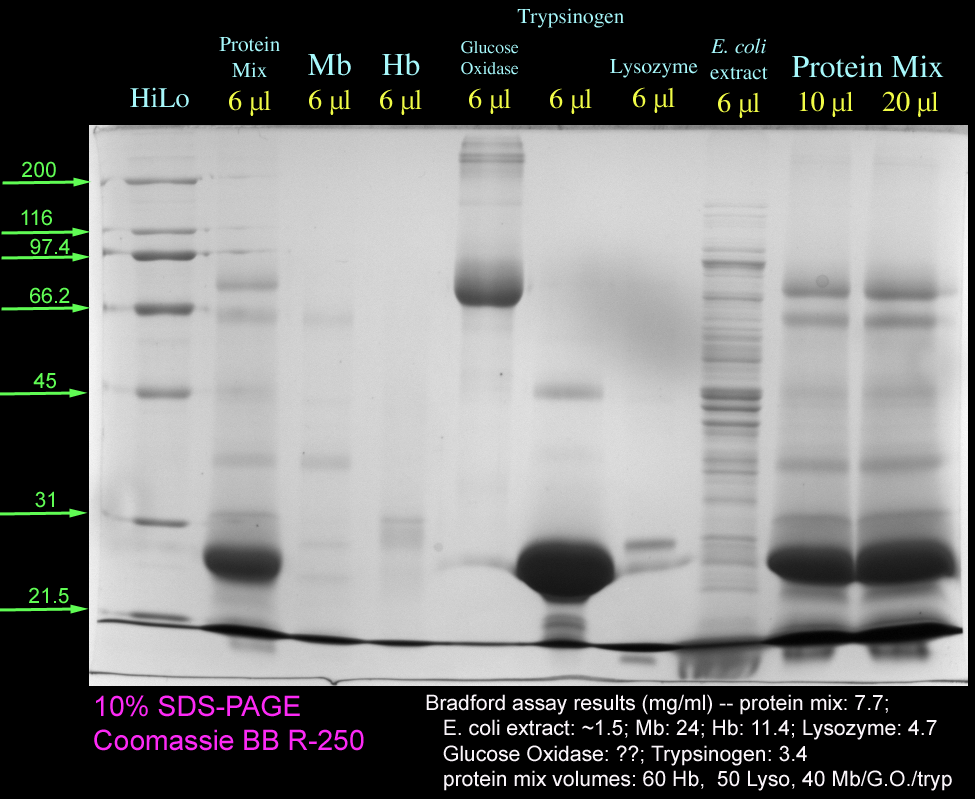
<style>
.page{position:relative;width:975px;height:799px;background:#000000}
.page>*{position:absolute;margin:0}
.t1{font:21.2px "Times-Roman";color:#a7f8fb}
.t2{font:28.2px "Times-Roman";color:#f1fc46}
.t3{font:17.6px "Times-Roman";color:#a7f8fb}
.t4{font:21.2px "Times-Italic";color:#a7f8fb}
.t5{font:31.8px "Times-Roman";color:#a7f8fb}
.t6{font:28.2px "Times-Roman";color:#a7f8fb}
.t7{font:28.2px "ArialMT";color:#fd2af6}
.t8{font:21.2px "ArialMT";color:#faf5fa}
</style>
<div class="page">
<p class="t1" style="left:517px;top:8px;width:107px;height:106px;text-align:center">Trypsinogen<br><br><br><span class="t2">6 µl</span></p>
<p class="t1" style="left:219px;top:36px;width:61px;height:80px;text-align:center">Protein<br>Mix<br><span class="t2">6 µl</span></p>
<p class="t3" style="left:461px;top:41px;width:58px;height:73px;text-align:center">Glucose<br>Oxidase<br><span class="t2">6 µl</span></p>
<p class="t4" style="left:710px;top:38px;width:58px;height:80px;text-align:center">E. coli<br><span class="t1">extract<br></span><span class="t2">6 µl</span></p>
<p class="t2" style="left:308px;top:53px;width:43px;height:62px;text-align:center"><span class="t5">Mb<br></span>6 µl</p>
<p class="t2" style="left:380px;top:53px;width:42px;height:62px;text-align:center"><span class="t5">Hb<br></span>6 µl</p>
<p class="t1" style="left:610px;top:59px;width:88px;height:54px;text-align:center">Lysozyme<br><span class="t2">6 µl</span></p>
<p class="t2" style="left:792px;top:55px;width:152px;height:62px;text-align:center"><span class="t5">Protein Mix<br></span>10 µl    20 µl</p>
<p class="t6" style="left:130px;top:87px;width:59px;height:21px">HiLo</p>
<p class="t7" style="left:94px;top:695px;width:270px;height:56px">10% SDS-PAGE<br>Coomassie BB R-250</p>
<p class="t8" style="left:426px;top:694px;width:526px;height:97px">Bradford assay results (mg/ml) -- protein mix: 7.7;<br>   E. coli extract: ~1.5; Mb: 24; Hb: 11.4; Lysozyme: 4.7<br>   Glucose Oxidase: ??; Trypsinogen: 3.4<br>   protein mix volumes: 60 Hb,  50 Lyso, 40 Mb/G.O./tryp</p>
</div>
